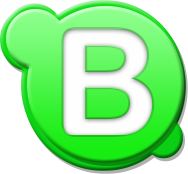
<style>
.page{position:relative;width:188px;height:174px;background:#ffffff}
.page>*{position:absolute;margin:0}
.t1{font:149px "ArialRoundedMTBold";letter-spacing:-0.1em;color:#fefefe}
</style>
<div class="page">
<p class="t1" style="left:63px;top:29px;width:90px;height:106px">B</p>
</div>
